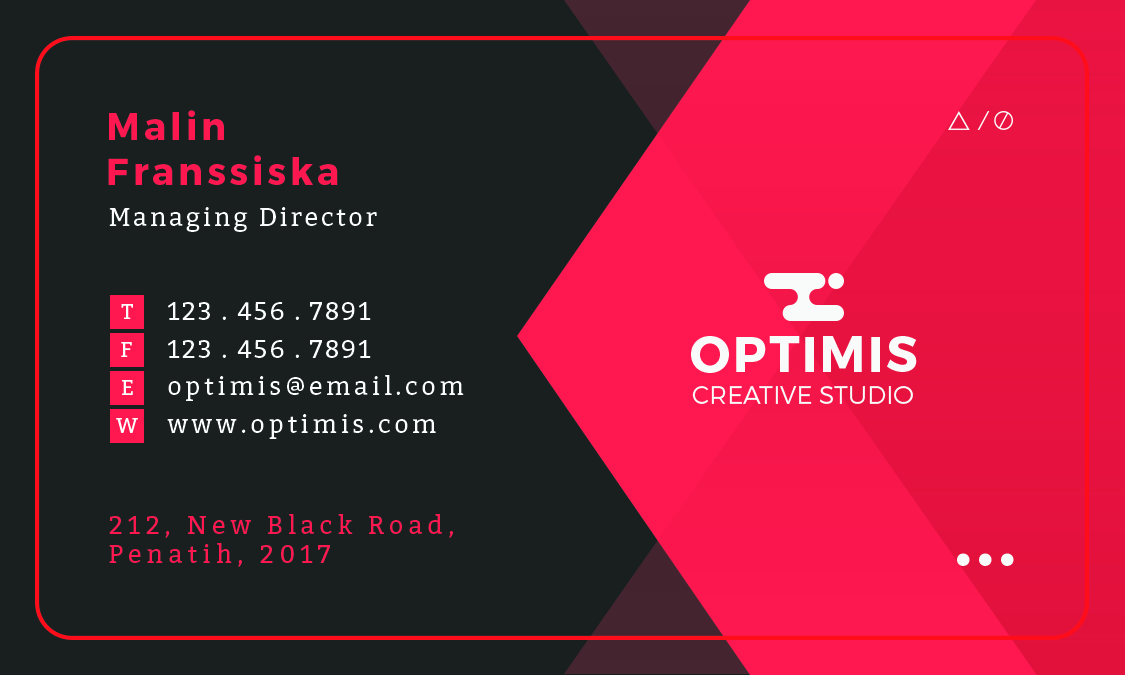
<style>
.page{position:relative;width:1125px;height:675px;background:#191e1f}
.page>*{position:absolute;margin:0}
.t1{font:37.5px "Montserrat-Bold";letter-spacing:0.1em;color:#ff1850}
.t2{font:25px "Bitter-Regular";letter-spacing:0.1em;color:#fbfdfd}
.t3{font:21.4px "Bitter-Regular";letter-spacing:0.2em;color:#fcfdfd}
.t4{font:25px "Bitter-Regular";letter-spacing:0.075em;color:#fbfdfd}
.t5{font:50px "Montserrat-Bold";letter-spacing:0.05em;color:#f9fbfb}
.t6{font:25px "Bitter-Regular";letter-spacing:0.14em;color:#fbfdfd}
.t7{font:25px "Montserrat-Light";color:#f9fbfb}
.t8{font:25px/29.2px "Bitter-Regular";letter-spacing:0.2em;color:#ff1850}
.t9{font:75px "Montserrat-Bold";letter-spacing:0.05em;color:#f9fbfb}
</style>
<div class="page">
<p class="t1" style="left:108px;top:110px;width:230px;height:75px">Malin<br>Franssiska</p>
<p class="t2" style="left:109px;top:207px;width:268px;height:25px">Managing Director</p>
<p class="t3" style="left:121px;top:304px;width:12px;height:15px">T</p>
<p class="t4" style="left:167px;top:302px;width:204px;height:18px">123 . 456 . 7891</p>
<p class="t3" style="left:121px;top:342px;width:11px;height:15px">F</p>
<p class="t4" style="left:167px;top:340px;width:204px;height:18px">123 . 456 . 7891</p>
<p class="t5" style="left:691px;top:336px;width:226px;height:37px">OPTIMIS</p>
<p class="t6" style="left:168px;top:375px;width:296px;height:26px">optimis@email.com</p>
<p class="t3" style="left:122px;top:380px;width:11px;height:15px">E</p>
<p class="t7" style="left:692px;top:386px;width:221px;height:18px">CREATIVE STUDIO</p>
<p class="t6" style="left:167px;top:414px;width:269px;height:25px">www.optimis.com</p>
<p class="t3" style="left:116px;top:418px;width:22px;height:15px">W</p>
<p class="t8" style="left:109px;top:514px;width:344px;height:53px">212, New Black Road,<br>Penatih, 2017</p>
<p class="t9" style="left:957px;top:553px;width:57px;height:13px">...</p>
</div>
